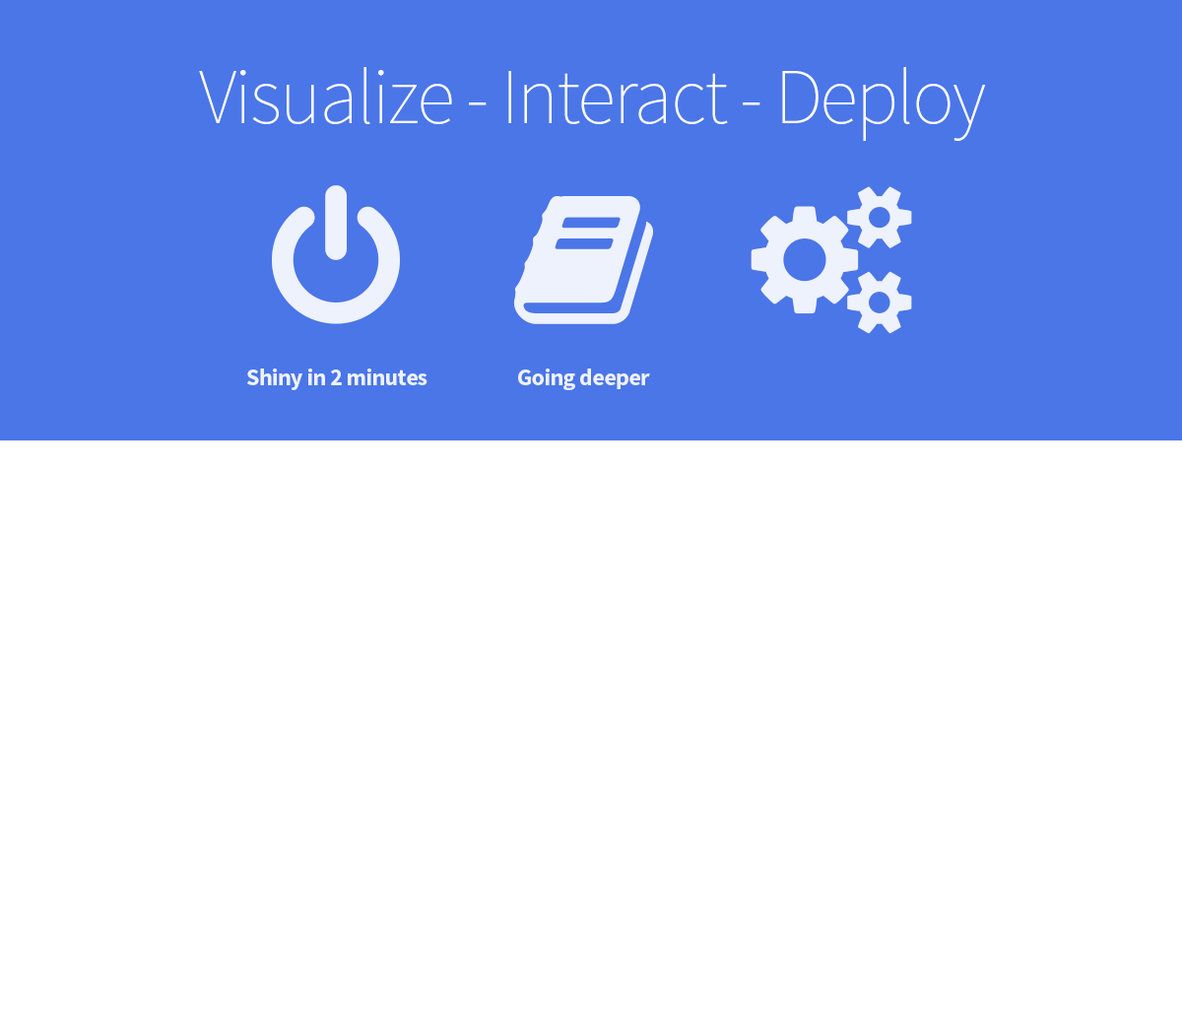
<style>
.page{position:relative;width:1182px;height:1009px;background:#ffffff}
.page>*{position:absolute;margin:0}
.t1{font:79px "SourceSansPro-ExtraLight";letter-spacing:-0.025em;color:#ffffff}
.t2{font:23.6px "SourceSansPro-Bold";letter-spacing:-0.025em;color:#ffffff}
</style>
<div class="page">
<p class="t1" style="left:199px;top:67px;width:787px;height:74px">Visualize - Interact - Deploy</p>
<p class="t2" style="left:247px;top:368px;width:181px;height:22px">Shiny in 2 minutes</p>
<p class="t2" style="left:518px;top:368px;width:132px;height:22px">Going deeper</p>
</div>
